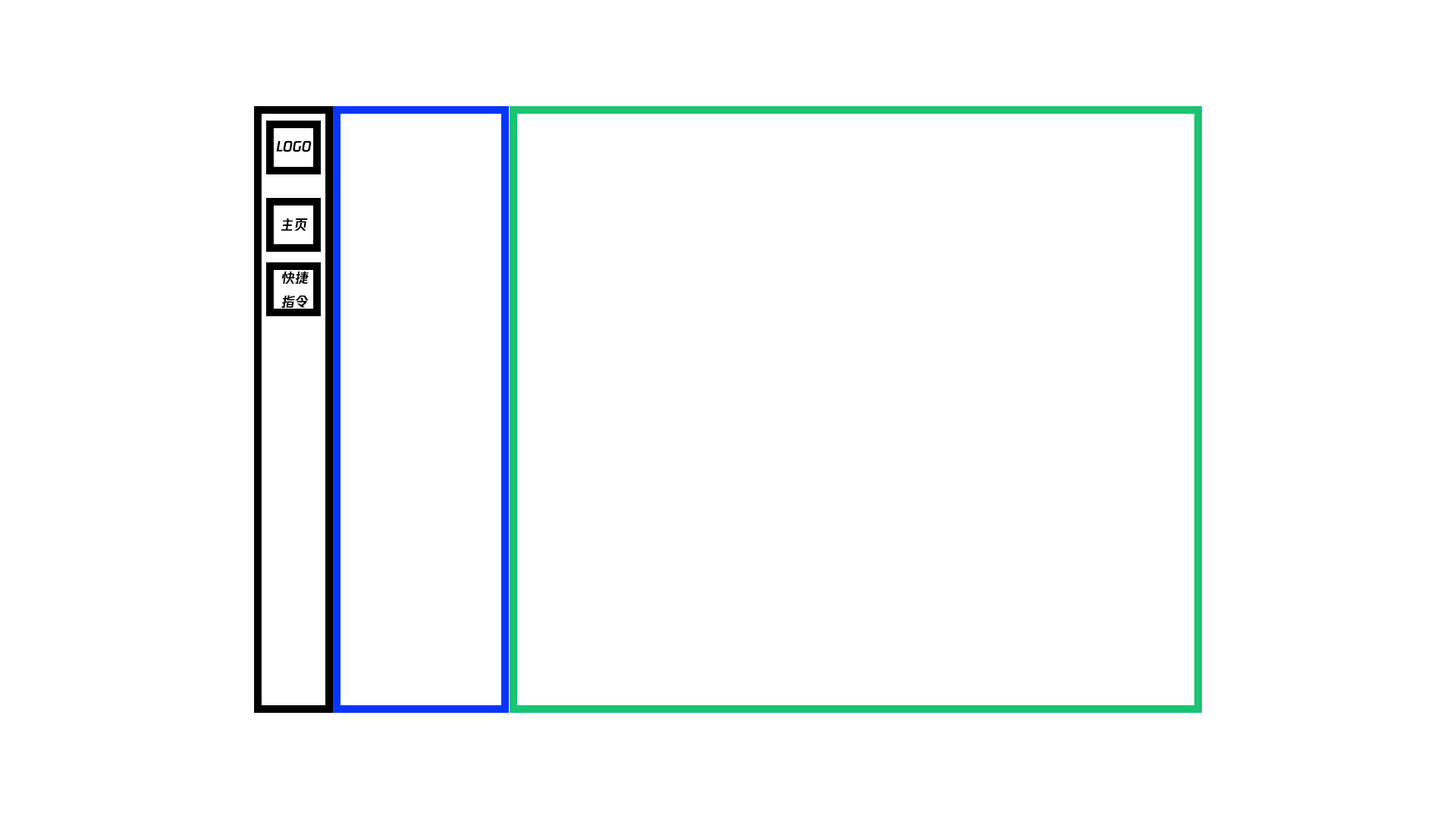
<style>
.page{position:relative;width:1456px;height:819px;background:#ffffff}
.page>*{position:absolute;margin:0}
.t1{font:13.6px "FontName";color:#000000}
</style>
<div class="page">
<p class="t1" style="left:276px;top:140px;width:36px;height:12px">LOGO</p>
<p class="t1" style="left:281px;top:218px;width:27px;height:13px">主页</p>
<p class="t1" style="left:281px;top:271px;width:28px;height:37px">快捷<br>指令</p>
</div>
